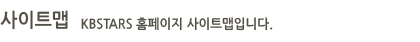
<style>
.page{position:relative;width:420px;height:42px;background:#ffffff}
.page>*{position:absolute;margin:0}
.t1{font:19.2px "NanumGothicBold";color:#545045;scale:0.95 1}
.t2{font:13.2px "NanumGothicBold";color:#545045;scale:0.95 1}
</style>
<div class="page">
<p class="t1" style="left:0px;top:10px;width:68px;height:20px">사이트맵</p>
<p class="t2" style="left:81px;top:17px;width:192px;height:14px">KBSTARS 홈페이지 사이트맵입니다.</p>
</div>
